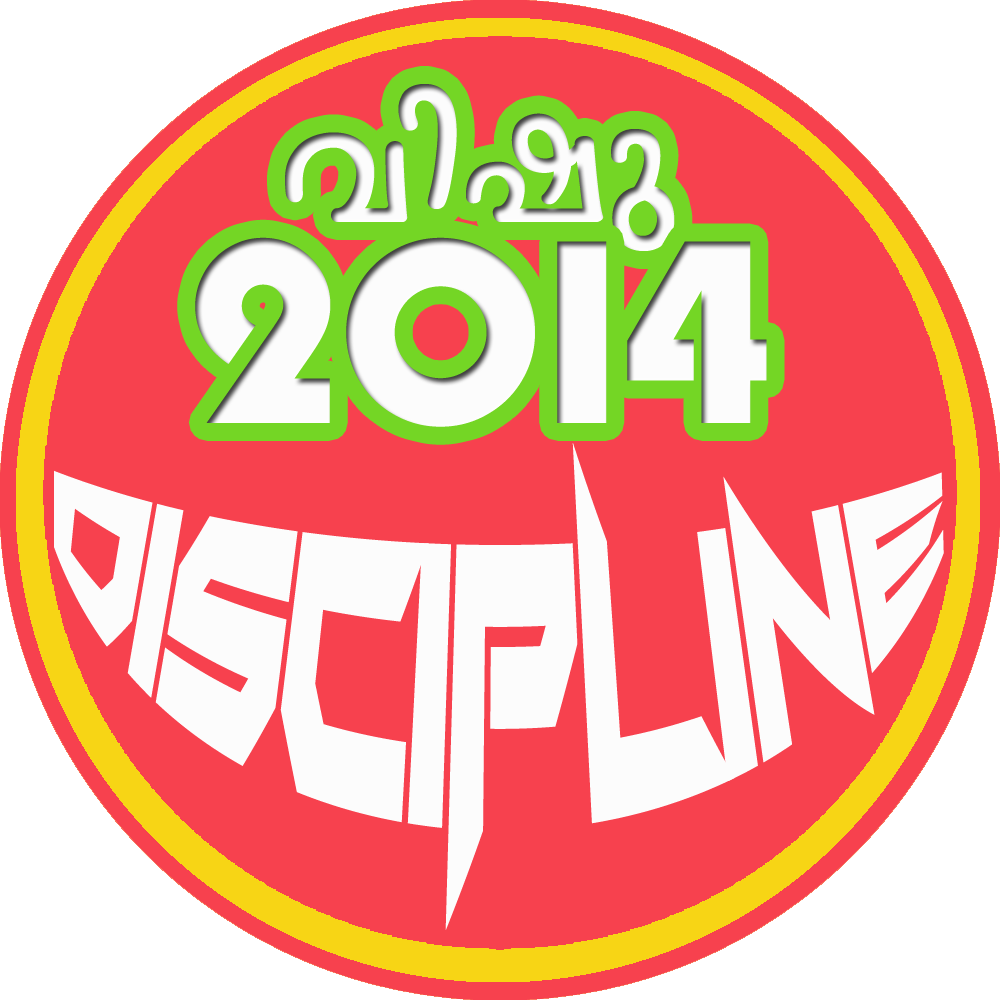
<style>
.page{position:relative;width:1000px;height:1000px;background:#f7414e}
.page>*{position:absolute;margin:0}
.t1{font:211.8px "FML-Nanditha";color:#fcfcfc}
.t2{font:272.3px "PumpDemiBoldLetPlain";color:#fcfcfc}
.t3{font:110.4px/82.8px "FoughtKnightVictory";color:#fcfcfc}
</style>
<div class="page">
<p class="t1" style="left:285px;top:84px;width:390px;height:167px">hnjp</p>
<p class="t2" style="left:195px;top:237px;width:572px;height:190px">2014</p>
<p class="t3" style="left:54px;top:443px;width:890px;height:487px">DisCIPLINE</p>
</div>
